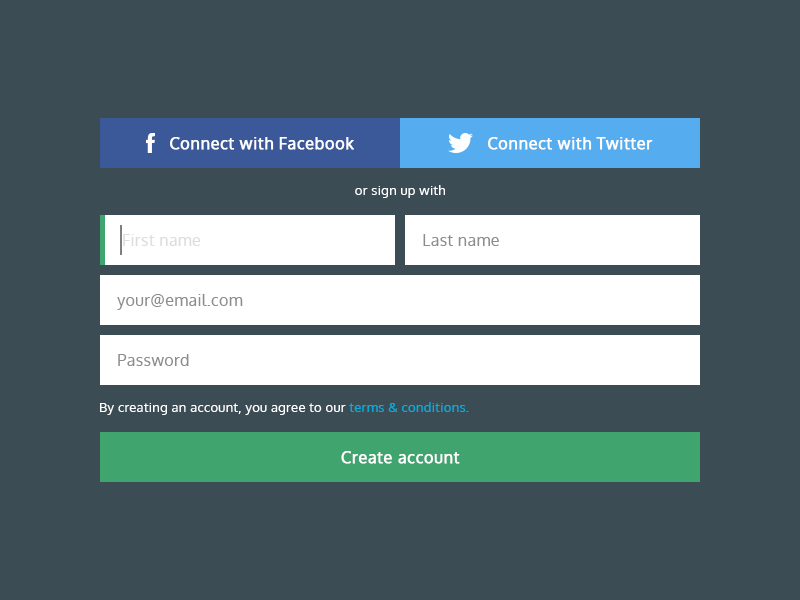
<style>
.page{position:relative;width:800px;height:600px;background:#3c4c55}
.page>*{position:absolute;margin:0}
.t1{font:16px "Oxygen-Regular";letter-spacing:0.025em;color:#ffffff;font-weight:bold}
.t2{font:13px "Oxygen-Regular";letter-spacing:0.025em;color:#ffffff}
.t3{font:16px "Oxygen-Regular";letter-spacing:0.025em;color:#dddddd}
.t4{font:16px "Oxygen-Regular";letter-spacing:0.025em;color:#8d8d8d}
.t5{font:13px "Oxygen-Regular";letter-spacing:0.025em;color:#00b0df}
</style>
<div class="page">
<p class="t1" style="left:170px;top:137px;width:184px;height:13px">Connect with Facebook</p>
<p class="t1" style="left:488px;top:137px;width:165px;height:13px">Connect with Twitter</p>
<p class="t2" style="left:355px;top:185px;width:90px;height:13px">or sign up with</p>
<p class="t3" style="left:123px;top:234px;width:78px;height:12px">First name</p>
<p class="t4" style="left:423px;top:234px;width:76px;height:12px">Last name</p>
<p class="t4" style="left:117px;top:294px;width:126px;height:16px">your@email.com</p>
<p class="t4" style="left:118px;top:354px;width:71px;height:12px">Password</p>
<p class="t2" style="left:100px;top:402px;width:369px;height:13px">By creating an account, you agree to our <span class="t5">terms &amp; conditions.</span></p>
<p class="t1" style="left:341px;top:451px;width:119px;height:13px">Create account</p>
</div>
